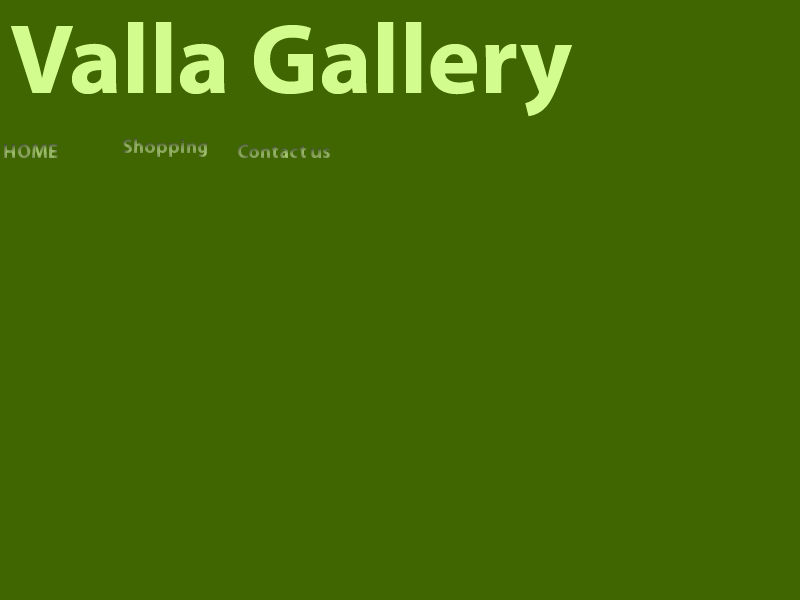
<style>
.page{position:relative;width:800px;height:600px;background:#3f6601}
.page>*{position:absolute;margin:0}
.t1{font:100px "KamranBold";color:#d2fc8e}
.t2{font:20px "KamranBold"}
</style>
<div class="page">
<p class="t1" style="left:11px;top:22px;width:561px;height:95px">Valla Gallery</p>
<p class="t2" style="left:4px;top:144px;width:54px;height:14px">HOME</p>
<p class="t2" style="left:122px;top:138px;width:85px;height:19px">Shopping</p>
<p class="t2" style="left:237px;top:144px;width:93px;height:14px">Contact us</p>
</div>
